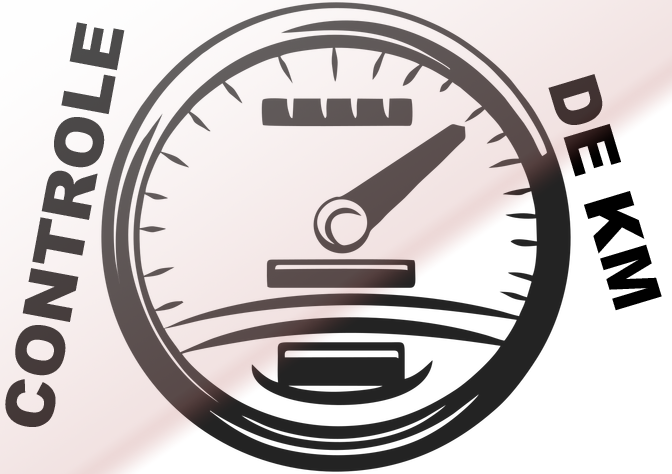
<style>
.page{position:relative;width:672px;height:474px}
.page>*{position:absolute;margin:0}
.t1{font:67.1px "Arial-Black";color:#494343}
.t2{font:67.1px "Arial-Black";color:#000000}
</style>
<div class="page">
<p class="t1" style="left:5px;top:22px;width:120px;height:405px;rotate:-79deg">CONTROLE</p>
<p class="t2" style="left:548px;top:74px;width:114px;height:237px;rotate:73deg">DE KM</p>
</div>
